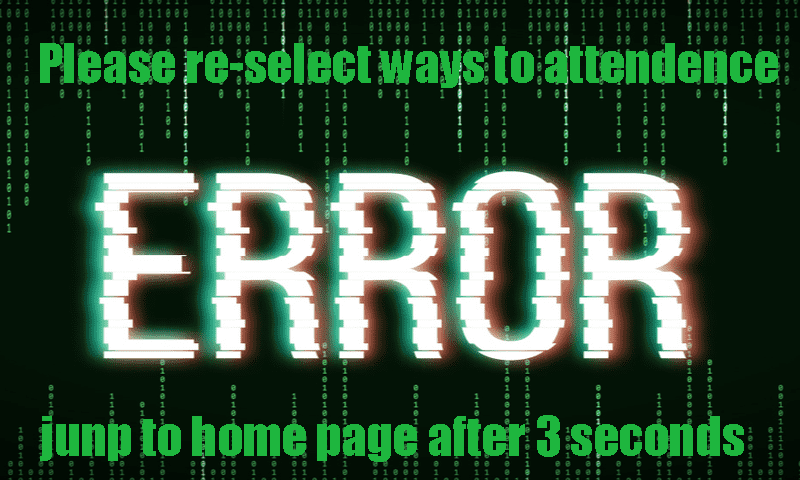
<style>
.page{position:relative;width:800px;height:480px;background:#031306}
.page>*{position:absolute;margin:0}
.t1{font:50px "Impact";color:#1eb63e}
</style>
<div class="page">
<p class="t1" style="left:40px;top:43px;width:738px;height:45px">Please re-select ways to attendence</p>
<p class="t1" style="left:40px;top:415px;width:704px;height:47px">junp to home page after 3 seconds</p>
</div>
